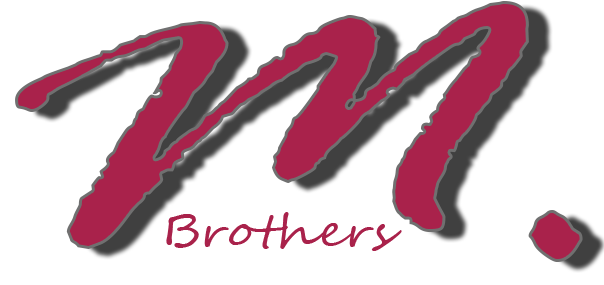
<style>
.page{position:relative;width:604px;height:285px;background:#ffffff}
.page>*{position:absolute;margin:0}
.t1{font:466.2px "RageItalic";color:#a9224b;scale:1.17 1}
.t2{font:44.3px "SegoeScript";color:#a9224b;scale:1.17 1}
</style>
<div class="page">
<p class="t1" style="left:15px;top:0px;width:568px;height:262px">M.</p>
<p class="t2" style="left:166px;top:212px;width:236px;height:39px">Brothers</p>
</div>
